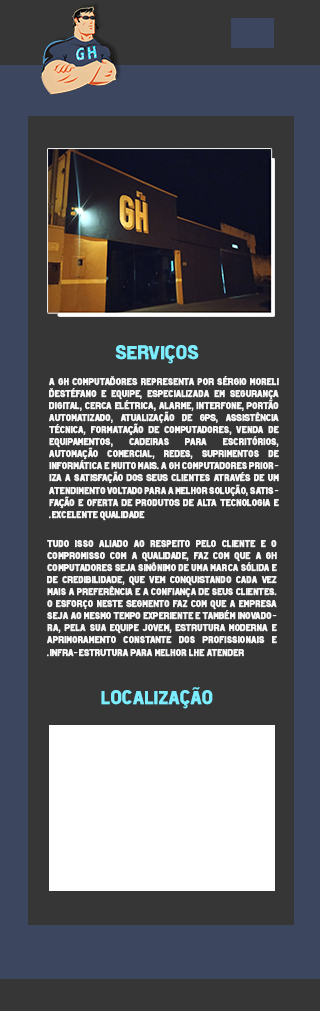
<style>
.page{position:relative;width:320px;height:1011px;background:#363636}
.page>*{position:absolute;margin:0}
.t1{font:19px "HotelDeParisXe";color:#7cedff;font-weight:bold}
.t2{font:10px "HotelDeParisXe";color:#f6f6f6;font-weight:bold;scale:0.92 1}
</style>
<div class="page">
<p class="t1" style="left:115px;top:345px;width:84px;height:19px">Serviços</p>
<p class="t2" style="left:49px;top:376px;width:230px;height:145px;text-align:justify">A GH COMPUTADORES representa por Sérgio Moreli Destéfano e equipe, especializada em segurança digital, cerca elétrica, alarme, interfone, portão automatizado, atualização de GPS, assistência técnica, formatação de computadores, venda de equipamentos, cadeiras para escritórios, automação comercial, redes, suprimentos de informática e muito mais. A GH Computadores prioriza a satisfação dos seus clientes através de um atendimento voltado para a melhor solução, satisfação e oferta de produtos de alta tecnologia e excelente qualidade.</p>
<p class="t2" style="left:47px;top:540px;width:230px;height:117px;text-align:justify">Tudo isso aliado ao respeito pelo cliente e o compromisso com a qualidade, faz com que a GH Computadores seja sinônimo de uma marca sólida e de credibilidade, que vem conquistando cada vez mais a preferência e a confiança de seus clientes. O esforço neste segmento faz com que a empresa seja ao mesmo tempo experiente e também inovadora, pela sua equipe jovem, estrutura moderna e aprimoramento constante dos profissionais e infra-estrutura para melhor lhe atender.</p>
<p class="t1" style="left:101px;top:687px;width:112px;height:22px">localização</p>
</div>
